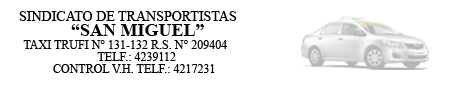
<style>
.page{position:relative;width:454px;height:85px;background:#ffffff}
.page>*{position:absolute;margin:0}
.t1{font:14px "TimesNewRomanPSMT";color:#000000}
.t2{font:18px "TimesNewRomanPS-BoldMT";color:#000000}
.t3{font:12px "TimesNewRomanPSMT";color:#000000}
</style>
<div class="page">
<p class="t1" style="left:19px;top:11px;width:218px;height:10px">SINDICATO DE TRANSPORTISTAS</p>
<p class="t2" style="left:71px;top:24px;width:133px;height:12px">“SAN MIGUEL”</p>
<p class="t3" style="left:23px;top:40px;width:204px;height:9px">TAXI TRUFI N° 131-132 R.S. N° 209404</p>
<p class="t3" style="left:97px;top:52px;width:79px;height:9px">TELF.: 4239112</p>
<p class="t3" style="left:53px;top:64px;width:162px;height:9px">CONTROL V.H. TELF.: 4217231</p>
</div>
